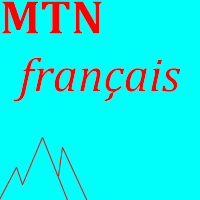
<style>
.page{position:relative;width:200px;height:200px;background:#00fffb}
.page>*{position:absolute;margin:0}
.t1{font:48px "Cambria-Italic";color:#ff0000}
.t2{font:48px "Cambria-Bold";color:#ff0000}
</style>
<div class="page">
<p class="t1" style="left:2px;top:1px;width:179px;height:101px"><span class="t2">MTN<br></span>français</p>
</div>
